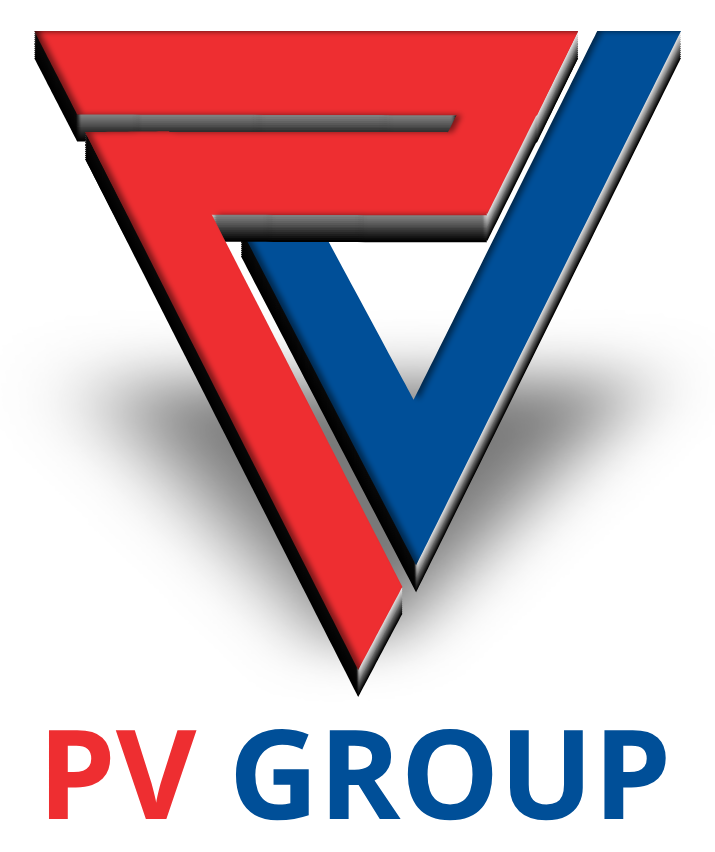
<style>
.page{position:relative;width:715px;height:852px;background:#ffffff}
.page>*{position:absolute;margin:0}
.t1{font:124.2px "OpenSans-Bold";color:#004f98;text-transform:uppercase}
.t2{font:124.2px "OpenSans-Bold";color:#ee2e31;text-transform:uppercase}
</style>
<div class="page">
<p class="t1" style="left:48px;top:728px;width:618px;height:93px"><span class="t2">PV </span>Group</p>
</div>
